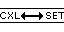
<style>
.page{position:relative;width:64px;height:32px;background:#ffffff}
.page>*{position:absolute;margin:0}
.t1{font:10px "Verdana";color:#000000}
</style>
<div class="page">
<p class="t1" style="left:0px;top:12px;width:20px;height:7px">CXL</p>
<p class="t1" style="left:46px;top:12px;width:19px;height:7px">SET</p>
</div>
